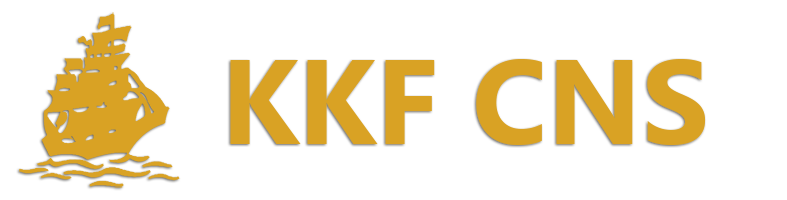
<style>
.page{position:relative;width:787px;height:200px;background:#ffffff}
.page>*{position:absolute;margin:0}
.t1{font:120px "SegoeUI-Bold";color:#d9a224}
</style>
<div class="page">
<p class="t1" style="left:230px;top:59px;width:476px;height:86px">KKF CNS</p>
</div>
